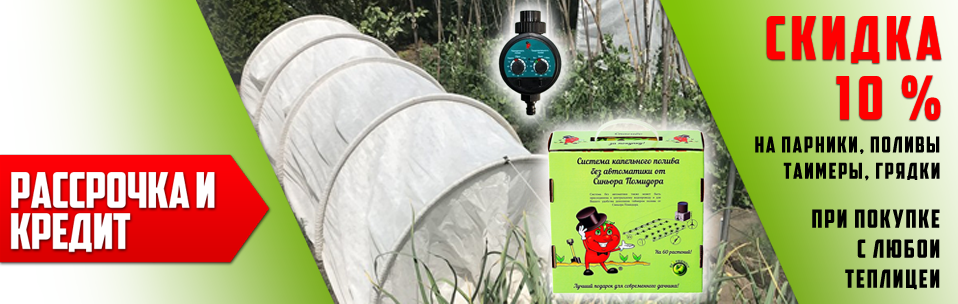
<style>
.page{position:relative;width:958px;height:304px}
.page>*{position:absolute;margin:0}
.t1{font:60px/60px "TheCapt";letter-spacing:0.075em;color:#ff0000}
.t2{font:36px "TheCapt";letter-spacing:0.075em;color:#fffeff}
.t3{font:22px "TheCapt";letter-spacing:0.075em;color:#000000}
.t4{font:25px "TheCapt";letter-spacing:0.075em;color:#000000}
</style>
<div class="page">
<p class="t1" style="left:766px;top:16px;width:176px;height:104px;text-align:right"><span class="t2"> </span>Скидка <br>10 %</p>
<p class="t3" style="left:755px;top:136px;width:185px;height:45px;text-align:right">на парники, поливы<br>таимеры, грядки</p>
<p class="t4" style="left:812px;top:209px;width:128px;height:81px;text-align:right">при покупке <br>с любои <br>теплицеи</p>
</div>
